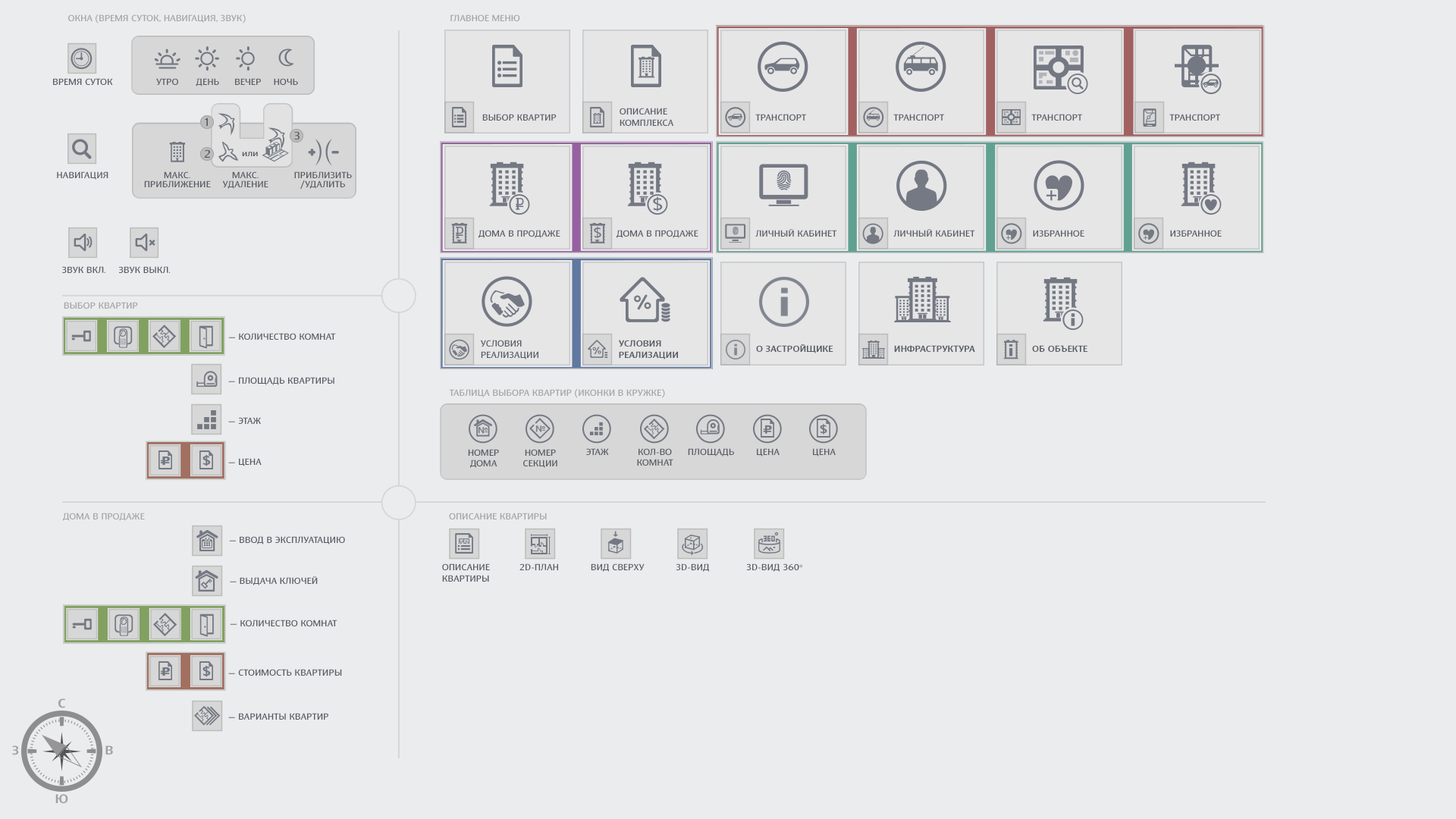
<style>
.page{position:relative;width:1456px;height:819px;background:#ebeced}
.page>*{position:absolute;margin:0}
.t1{font:9.1px "BarnaulGroteskMedium-Reg";color:#a6a6a6;scale:1.25 1}
.t2{font:9.1px "BarnaulGroteskMedium-Reg";color:#595d65;scale:1.25 1}
.t3{font:11.4px "BarnaulGroteskMedium-Reg";color:#595d65;scale:1.25 1}
.t4{font:9.1px/9.1px "BarnaulGroteskMedium-Reg";color:#595d65;scale:1.25 1}
.t5{font:17.5px "BarnaulGroteskMedium-Reg";color:#737883;scale:1.25 1}
.t6{font:14.1px "BarnaulGroteskMedium-Reg";color:#737883;scale:1.25 1}
.t7{font:9.1px "BarnaulGroteskBold-Reg";color:#595d65;scale:1.25 1}
.t8{font:12.5px "BarnaulGroteskBold-Reg";color:#a2a0a1;scale:1.25 1}
</style>
<div class="page">
<p class="t1" style="left:68px;top:14px;width:178px;height:10px">ОКНА (ВРЕМЯ СУТОК, НАВИГАЦИЯ, ЗВУК)</p>
<p class="t1" style="left:450px;top:14px;width:70px;height:7px">ГЛАВНОЕ МЕНЮ</p>
<p class="t2" style="left:53px;top:78px;width:60px;height:7px">ВРЕМЯ СУТОК</p>
<p class="t2" style="left:156px;top:78px;width:22px;height:7px">УТРО</p>
<p class="t2" style="left:196px;top:78px;width:23px;height:8px">ДЕНЬ</p>
<p class="t2" style="left:235px;top:78px;width:26px;height:7px">ВЕЧЕР</p>
<p class="t2" style="left:274px;top:78px;width:24px;height:7px">НОЧЬ</p>
<p class="t2" style="left:482px;top:114px;width:75px;height:7px">ВЫБОР КВАРТИР</p>
<p class="t2" style="left:620px;top:108px;width:53px;height:18px">ОПИСАНИЕ<br>КОМПЛЕКСА</p>
<p class="t2" style="left:755px;top:114px;width:51px;height:7px">ТРАНСПОРТ</p>
<p class="t2" style="left:893px;top:114px;width:51px;height:7px">ТРАНСПОРТ</p>
<p class="t2" style="left:1031px;top:114px;width:51px;height:7px">ТРАНСПОРТ</p>
<p class="t2" style="left:1169px;top:114px;width:51px;height:7px">ТРАНСПОРТ</p>
<p class="t3" style="left:205px;top:118px;width:3px;height:8px">1</p>
<p class="t3" style="left:294px;top:131px;width:6px;height:9px">3</p>
<p class="t3" style="left:204px;top:149px;width:6px;height:9px">2</p>
<p class="t2" style="left:242px;top:152px;width:16px;height:4px">или</p>
<p class="t2" style="left:57px;top:171px;width:51px;height:9px">НАВИГАЦИЯ</p>
<p class="t4" style="left:144px;top:171px;width:67px;height:16px;text-align:center">МАКС.<br>ПРИБЛИЖЕНИЕ</p>
<p class="t4" style="left:222px;top:171px;width:46px;height:18px;text-align:center">МАКС.<br>УДАЛЕНИЕ</p>
<p class="t4" style="left:294px;top:171px;width:58px;height:18px;text-align:center">ПРИБЛИЗИТЬ<br>/УДАЛИТЬ</p>
<p class="t5" style="left:653px;top:196px;width:10px;height:16px">$</p>
<p class="t2" style="left:479px;top:230px;width:81px;height:8px">ДОМА В ПРОДАЖЕ</p>
<p class="t6" style="left:594px;top:226px;width:7px;height:13px">$</p>
<p class="t2" style="left:617px;top:230px;width:81px;height:8px">ДОМА В ПРОДАЖЕ</p>
<p class="t2" style="left:755px;top:229px;width:82px;height:8px">ЛИЧНЫЙ КАБИНЕТ</p>
<p class="t2" style="left:893px;top:229px;width:82px;height:8px">ЛИЧНЫЙ КАБИНЕТ</p>
<p class="t2" style="left:1033px;top:230px;width:51px;height:7px">ИЗБРАННОЕ</p>
<p class="t2" style="left:1170px;top:230px;width:52px;height:7px">ИЗБРАННОЕ</p>
<p class="t2" style="left:62px;top:266px;width:43px;height:7px">ЗВУК ВКЛ.</p>
<p class="t2" style="left:119px;top:266px;width:52px;height:7px">ЗВУК ВЫКЛ.</p>
<p class="t1" style="left:64px;top:302px;width:74px;height:7px">ВЫБОР КВАРТИР</p>
<p class="t2" style="left:228px;top:333px;width:108px;height:7px">— КОЛИЧЕСТВО КОМНАТ</p>
<p class="t2" style="left:480px;top:340px;width:58px;height:19px">УСЛОВИЯ<br>РЕАЛИЗАЦИИ</p>
<p class="t7" style="left:618px;top:340px;width:60px;height:19px">УСЛОВИЯ<br>РЕАЛИЗАЦИИ</p>
<p class="t7" style="left:756px;top:344px;width:77px;height:9px">О ЗАСТРОЙЩИКЕ</p>
<p class="t7" style="left:894px;top:345px;width:81px;height:7px">ИНФРАСТРУКТУРА</p>
<p class="t7" style="left:1032px;top:345px;width:55px;height:7px">ОБ ОБЪЕКТЕ</p>
<p class="t2" style="left:228px;top:377px;width:106px;height:8px">— ПЛОЩАДЬ КВАРТИРЫ</p>
<p class="t1" style="left:449px;top:388px;width:216px;height:10px">ТАБЛИЦА ВЫБОРА КВАРТИР (ИКОНКИ В КРУЖКЕ)</p>
<p class="t2" style="left:228px;top:417px;width:33px;height:7px">— ЭТАЖ</p>
<p class="t2" style="left:468px;top:449px;width:31px;height:19px;text-align:center">НОМЕР<br>ДОМА</p>
<p class="t2" style="left:523px;top:449px;width:34px;height:19px;text-align:center">НОМЕР<br>СЕКЦИИ</p>
<p class="t2" style="left:586px;top:448px;width:23px;height:7px">ЭТАЖ</p>
<p class="t2" style="left:637px;top:448px;width:36px;height:18px;text-align:center">КОЛ-ВО<br>КОМНАТ</p>
<p class="t2" style="left:688px;top:448px;width:46px;height:9px">ПЛОЩАДЬ</p>
<p class="t2" style="left:757px;top:448px;width:23px;height:9px">ЦЕНА</p>
<p class="t2" style="left:813px;top:448px;width:23px;height:9px">ЦЕНА</p>
<p class="t2" style="left:228px;top:458px;width:34px;height:8px">— ЦЕНА</p>
<p class="t1" style="left:63px;top:513px;width:82px;height:8px">ДОМА В ПРОДАЖЕ</p>
<p class="t1" style="left:449px;top:513px;width:98px;height:6px">ОПИСАНИЕ КВАРТИРЫ</p>
<p class="t2" style="left:229px;top:536px;width:116px;height:8px">— ВВОД В ЭКСПЛУАТАЦИЮ</p>
<p class="t2" style="left:442px;top:563px;width:48px;height:19px">ОПИСАНИЕ<br>КВАРТИРЫ</p>
<p class="t2" style="left:519px;top:563px;width:39px;height:7px">2D-ПЛАН</p>
<p class="t2" style="left:591px;top:563px;width:54px;height:9px">ВИД СВЕРХУ</p>
<p class="t2" style="left:676px;top:563px;width:33px;height:9px">3D-ВИД</p>
<p class="t2" style="left:746px;top:563px;width:56px;height:9px">3D-ВИД 360o</p>
<p class="t2" style="left:230px;top:576px;width:88px;height:9px">— ВЫДАЧА КЛЮЧЕЙ</p>
<p class="t2" style="left:230px;top:620px;width:107px;height:6px">— КОЛИЧЕСТВО КОМНАТ</p>
<p class="t2" style="left:228px;top:669px;width:114px;height:7px">— СТОИМОСТЬ КВАРТИРЫ</p>
<p class="t8" style="left:58px;top:698px;width:7px;height:10px">С</p>
<p class="t2" style="left:228px;top:713px;width:100px;height:7px">— ВАРИАНТЫ КВАРТИР</p>
<p class="t8" style="left:12px;top:745px;width:7px;height:10px">З</p>
<p class="t8" style="left:105px;top:745px;width:8px;height:10px">В</p>
<p class="t8" style="left:55px;top:794px;width:13px;height:10px">Ю</p>
</div>
